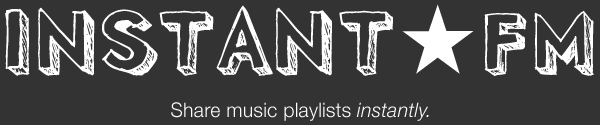
<style>
.page{position:relative;width:600px;height:125px;background:#333333}
.page>*{position:absolute;margin:0}
.t1{font:88px "Pointy";letter-spacing:0.025em;color:#ffffff}
.t2{font:88px "Pointy";letter-spacing:0.075em;color:#ffffff}
.t3{font:88px "Pointy";letter-spacing:0.01em;color:#ffffff}
.t4{font:88px "AdobeFanHeitiStd-Bold";letter-spacing:0.025em;color:#ffffff}
.t5{font:20px "HelveticaNeue-Light";letter-spacing:0.015em;color:#ffffff}
.t6{font:20px "HelveticaNeue-LightItalic";letter-spacing:0.015em;color:#ffffff}
</style>
<div class="page">
<p class="t1" style="left:5px;top:4px;width:589px;height:72px"><span class="t2">I</span>N<span class="t3">S</span>TANT<span class="t4">★</span>FM</p>
<p class="t5" style="left:171px;top:102px;width:258px;height:19px">Share music playlists <span class="t6">instantly.</span></p>
</div>
